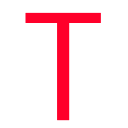
<style>
.page{position:relative;width:128px;height:128px;background:#ffffff}
.page>*{position:absolute;margin:0}
.t1{font:140.9px "KozGoPr6N-Regular";color:#ff002a;font-weight:bold}
</style>
<div class="page">
<p class="t1" style="left:25px;top:12px;width:76px;height:109px">T</p>
</div>
